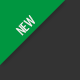
<style>
.page{position:relative;width:80px;height:80px;background:#333333}
.page>*{position:absolute;margin:0}
.t1{font:14px "MyriadPro-Cond";letter-spacing:-0.025em;color:#f1f1f1}
</style>
<div class="page">
<p class="t1" style="left:15px;top:15px;width:20px;height:21px;rotate:-45deg">NEW</p>
</div>
